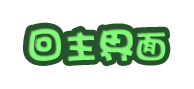
<style>
.page{position:relative;width:194px;height:89px;background:#ffffff}
.page>*{position:absolute;margin:0}
.t1{font:37.5px "DFPHaiBaoW12";letter-spacing:-0.005em}
.t2{font:33.3px "DFPHaiBaoW12";letter-spacing:-0.005em}
</style>
<div class="page">
<p class="t1" style="left:28px;top:27px;width:138px;height:35px">回<span class="t2">主</span>界<span class="t2">面</span></p>
</div>
